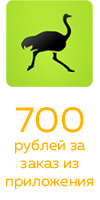
<style>
.page{position:relative;width:100px;height:200px;background:#ffffff}
.page>*{position:absolute;margin:0}
.t1{font:15px "MullerRegular";color:#ffb300}
.t2{font:36px "MullerRegular";color:#ffb300}
</style>
<div class="page">
<p class="t1" style="left:6px;top:107px;width:88px;height:83px;text-align:center"><span class="t2">700<br></span>рублей за<br>заказ из<br>приложения</p>
</div>
